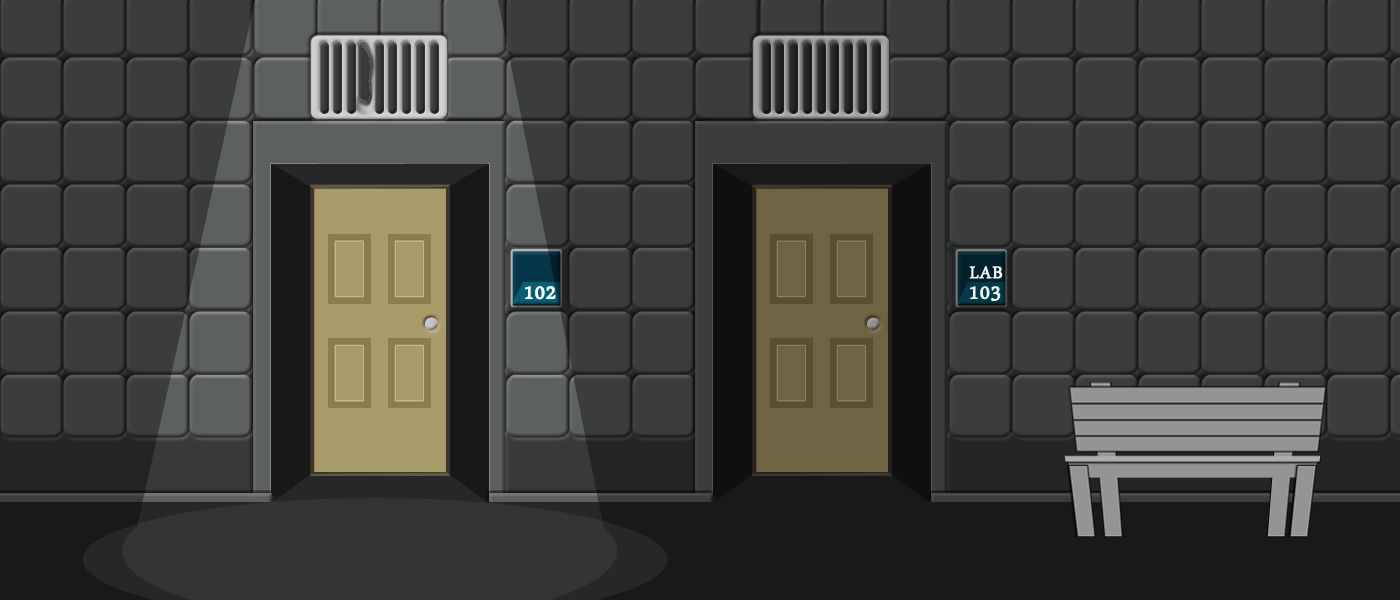
<style>
.page{position:relative;width:1400px;height:600px;background:#3b3c3c}
.page>*{position:absolute;margin:0}
.t1{font:24px "ArabicTypesetting";letter-spacing:0.025em;color:#f3f3f3;font-weight:bold}
.t2{font:28.5px "ArabicTypesetting";letter-spacing:0.025em;color:#f3f3f3;font-weight:bold}
</style>
<div class="page">
<p class="t1" style="left:969px;top:266px;width:34px;height:13px">LAB</p>
<p class="t2" style="left:525px;top:286px;width:31px;height:14px">102</p>
<p class="t2" style="left:970px;top:286px;width:31px;height:15px">103</p>
</div>
